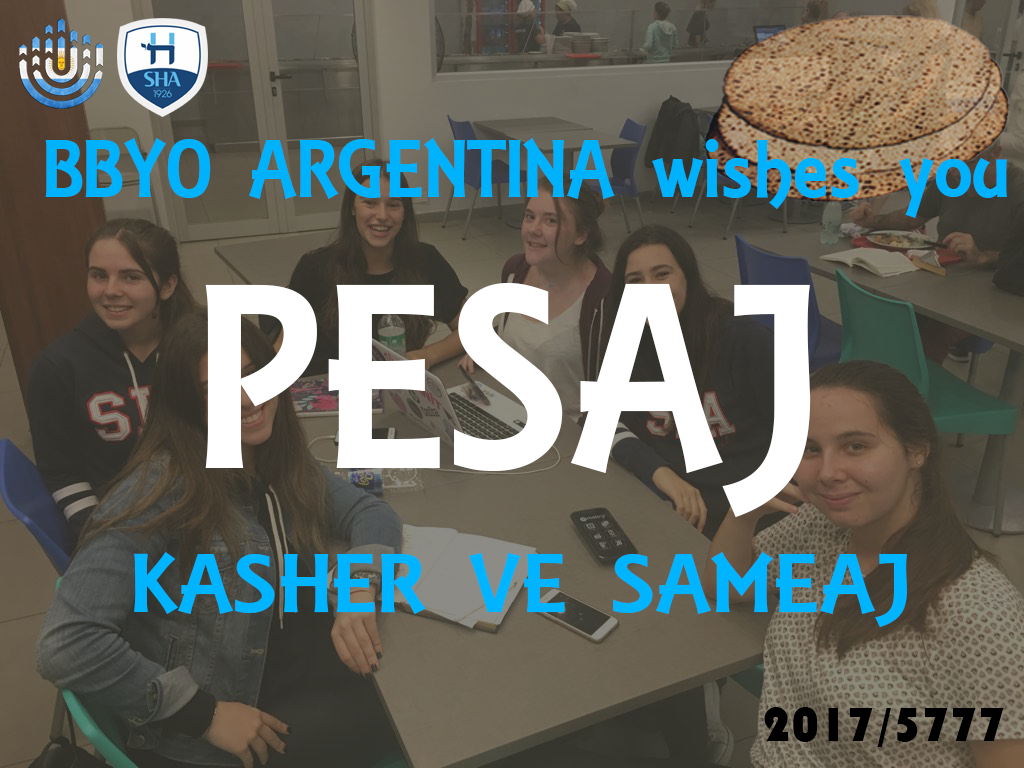
<style>
.page{position:relative;width:1024px;height:768px}
.page>*{position:absolute;margin:0}
.t1{font:88.4px "ARESSENCE";color:#00b1fb}
.t2{font:281.5px "ARESSENCE";color:#ffffff}
.t3{font:89.3px "ARESSENCE";color:#00b4ff;scale:1.14 1}
.t4{font:50px "Bauhaus93";color:#000000}
</style>
<div class="page">
<p class="t1" style="left:45px;top:138px;width:962px;height:80px">BBYO ARGENTINA wishes you</p>
<p class="t2" style="left:205px;top:282px;width:606px;height:235px">PESAJ</p>
<p class="t3" style="left:134px;top:552px;width:773px;height:75px">KASHER VE SAMEAJ</p>
<p class="t4" style="left:764px;top:707px;width:240px;height:40px">2017/5777</p>
</div>
